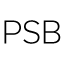
<style>
.page{position:relative;width:64px;height:64px;background:#ffffff}
.page>*{position:absolute;margin:0}
.t1{font:30px "Usual-Light";color:#000000}
</style>
<div class="page">
<p class="t1" style="left:4px;top:20px;width:57px;height:24px">PSB</p>
</div>
